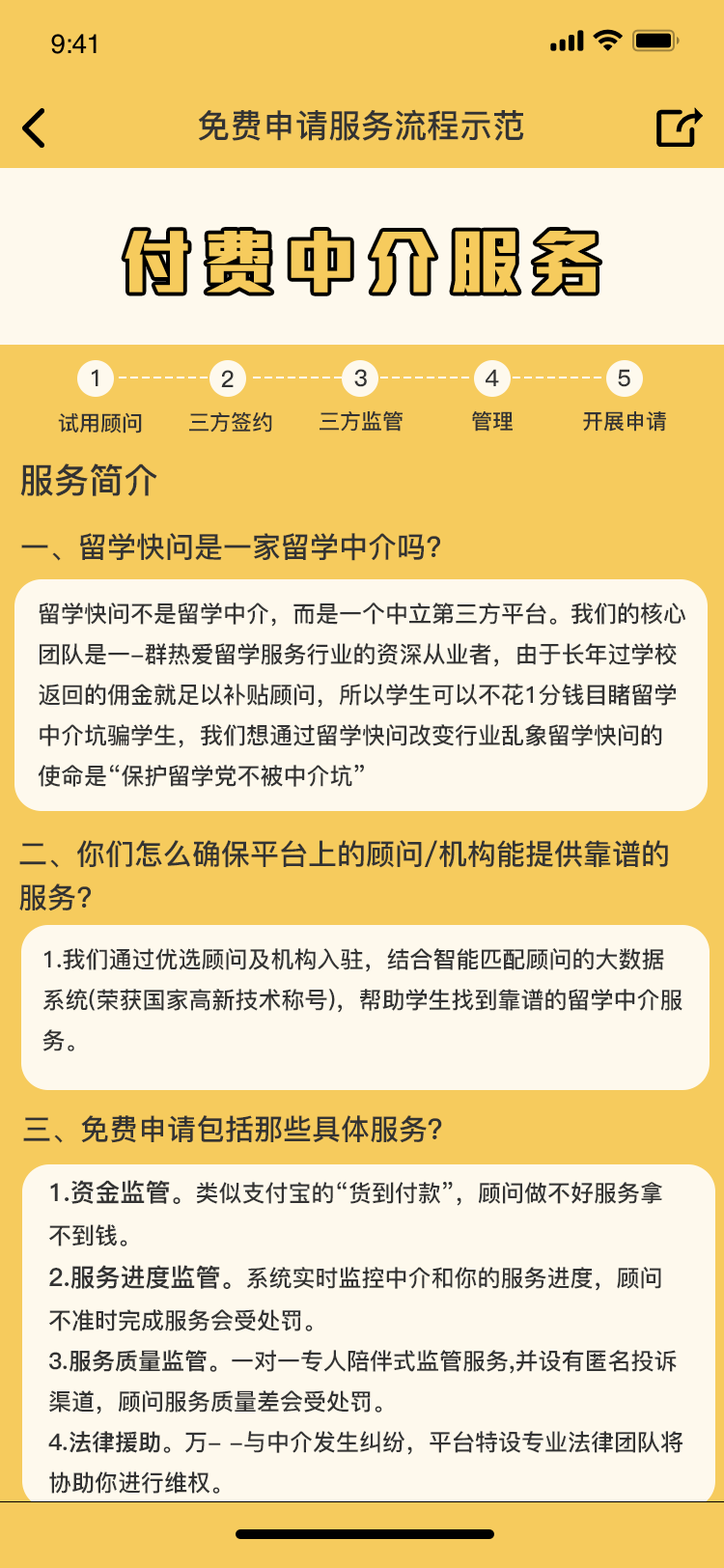
<style>
.page{position:relative;width:724px;height:1568px;background:#f6cb5d}
.page>*{position:absolute;margin:0}
.t1{font:32.8px "PingFang-SC-Bold";color:#333333}
.t2{font:69.5px "MStiffHeiPRC-UltraBold";letter-spacing:0.18em;color:#f6cb5d}
.t3{font:23.2px "PingFang-SC-Bold";letter-spacing:0.18em;color:#333333}
.t4{font:21.2px "PingFang-SC-Bold";color:#333333}
.t5{font:34.8px "PingFang-SC-Bold";color:#333333}
.t6{font:29px "PingFang-SC-Bold";color:#333333}
.t7{font:23.2px "PingFang-SC-Bold";color:#333333}
.t8{font:29px/43.4px "PingFang-SC-Bold";color:#333333}
.t9{font:25.1px "PingFang-SC-Heavy";color:#333333}
.t10{font:25.1px "PingFang-SC-Bold";color:#333333}
.t11{font:23.2px "PingFang-SC-Heavy";color:#333333}
</style>
<div class="page">
<p class="t1" style="left:198px;top:109px;width:326px;height:32px">免费申请服务流程示范</p>
<p class="t2" style="left:125px;top:231px;width:475px;height:62px">付费中介服务</p>
<p class="t3" style="left:92px;top:369px;width:6px;height:17px">1</p>
<p class="t3" style="left:221px;top:370px;width:13px;height:17px">2</p>
<p class="t3" style="left:354px;top:369px;width:13px;height:18px">3</p>
<p class="t3" style="left:486px;top:369px;width:13px;height:17px">4</p>
<p class="t3" style="left:618px;top:369px;width:12px;height:18px">5</p>
<p class="t4" style="left:58px;top:412px;width:84px;height:22px">试用顾问</p>
<p class="t4" style="left:189px;top:412px;width:83px;height:21px">三方签约</p>
<p class="t4" style="left:320px;top:410px;width:83px;height:22px">三方监管</p>
<p class="t4" style="left:472px;top:410px;width:41px;height:22px">管理</p>
<p class="t4" style="left:583px;top:411px;width:83px;height:21px">开展申请</p>
<p class="t5" style="left:20px;top:463px;width:137px;height:33px">服务简介</p>
<p class="t6" style="left:21px;top:533px;width:419px;height:28px">一、留学快问是一家留学中介吗?</p>
<p class="t7" style="left:38px;top:602px;width:648px;height:185px">留学快问不是留学中介，而是一个中立第三方平台。我们的核心<br>团队是一-群热爱留学服务行业的资深从业者，由于长年过学校<br>返回的佣金就足以补贴顾问，所以学生可以不花1分钱目睹留学<br>中介坑骗学生，我们想通过留学快问改变行业乱象留学快问的<br>使命是“保护留学党不被中介坑”</p>
<p class="t8" style="left:19px;top:840px;width:649px;height:71px">二、你们怎么确保平台上的顾问/机构能提供靠谱的<br>服务?</p>
<p class="t7" style="left:42px;top:948px;width:641px;height:103px">1.我们通过优选顾问及机构入驻，结合智能匹配顾问的大数据<br>系统(荣获国家高新技术称号)，帮助学生找到靠谱的留学中介服<br>务。</p>
<p class="t6" style="left:23px;top:1115px;width:419px;height:28px">三、免费申请包括那些具体服务？</p>
<p class="t7" style="left:48px;top:1180px;width:635px;height:314px"><span class="t9">1.资金监管</span><span class="t10">。</span>类似支付宝的“货到付款”，顾问做不好服务拿<br>不到钱。<br><span class="t9">2.服务进度监管。</span>系统实时监控中介和你的服务进度，顾问<br>不准时完成服务会受处罚。<br><span class="t11">3.服务质量监管。</span>一对一专人陪伴式监管服务,并设有匿名投诉<br>渠道，顾问服务质量差会受处罚。<br><span class="t11">4.法律援助</span>。万- -与中介发生纠纷，平台特设专业法律团队将<br>协助你进行维权。</p>
</div>
